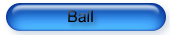
<style>
.page{position:relative;width:170px;height:35px}
.page>*{position:absolute;margin:0}
.t1{font:16px "ArialMT";color:#000000}
</style>
<div class="page">
<p class="t1" style="left:68px;top:10px;width:25px;height:13px">Ball</p>
</div>
